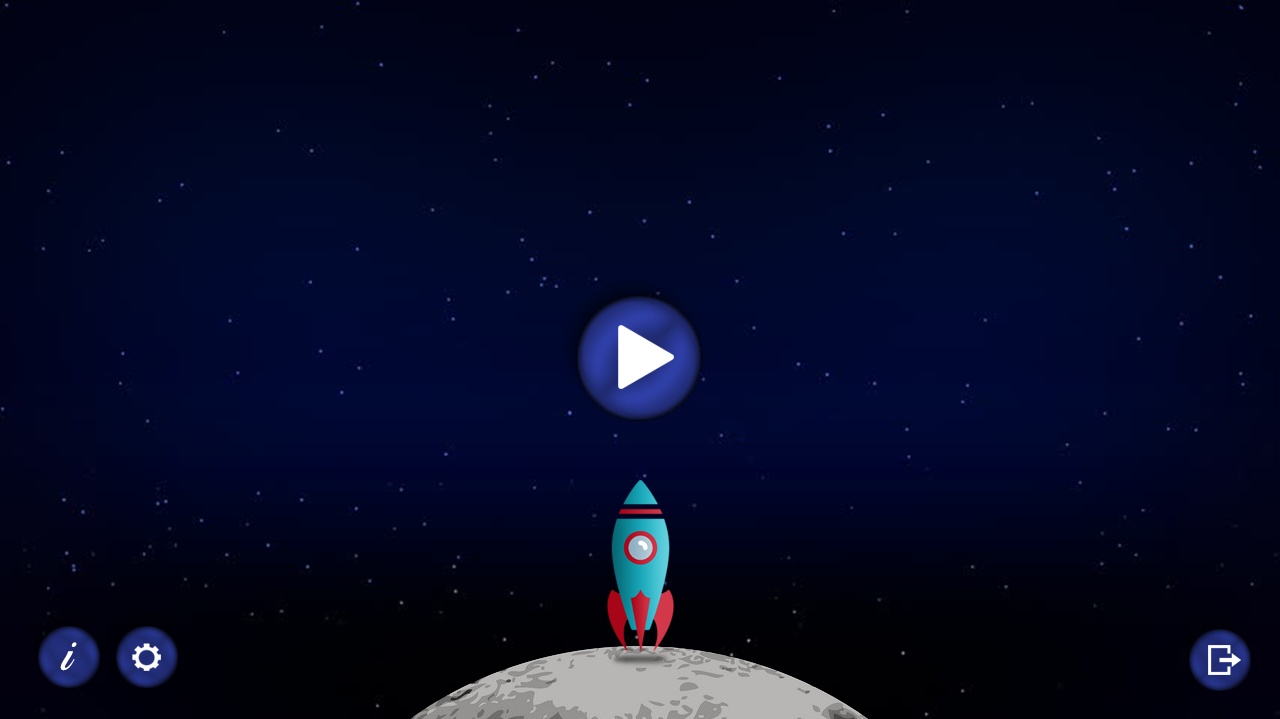
<style>
.page{position:relative;width:1280px;height:719px}
.page>*{position:absolute;margin:0}
.t1{font:41.7px "BirdsofParadise-PersonaluseOnly";color:#ffffff}
</style>
<div class="page">
<p class="t1" style="left:60px;top:642px;width:17px;height:29px">i</p>
</div>
